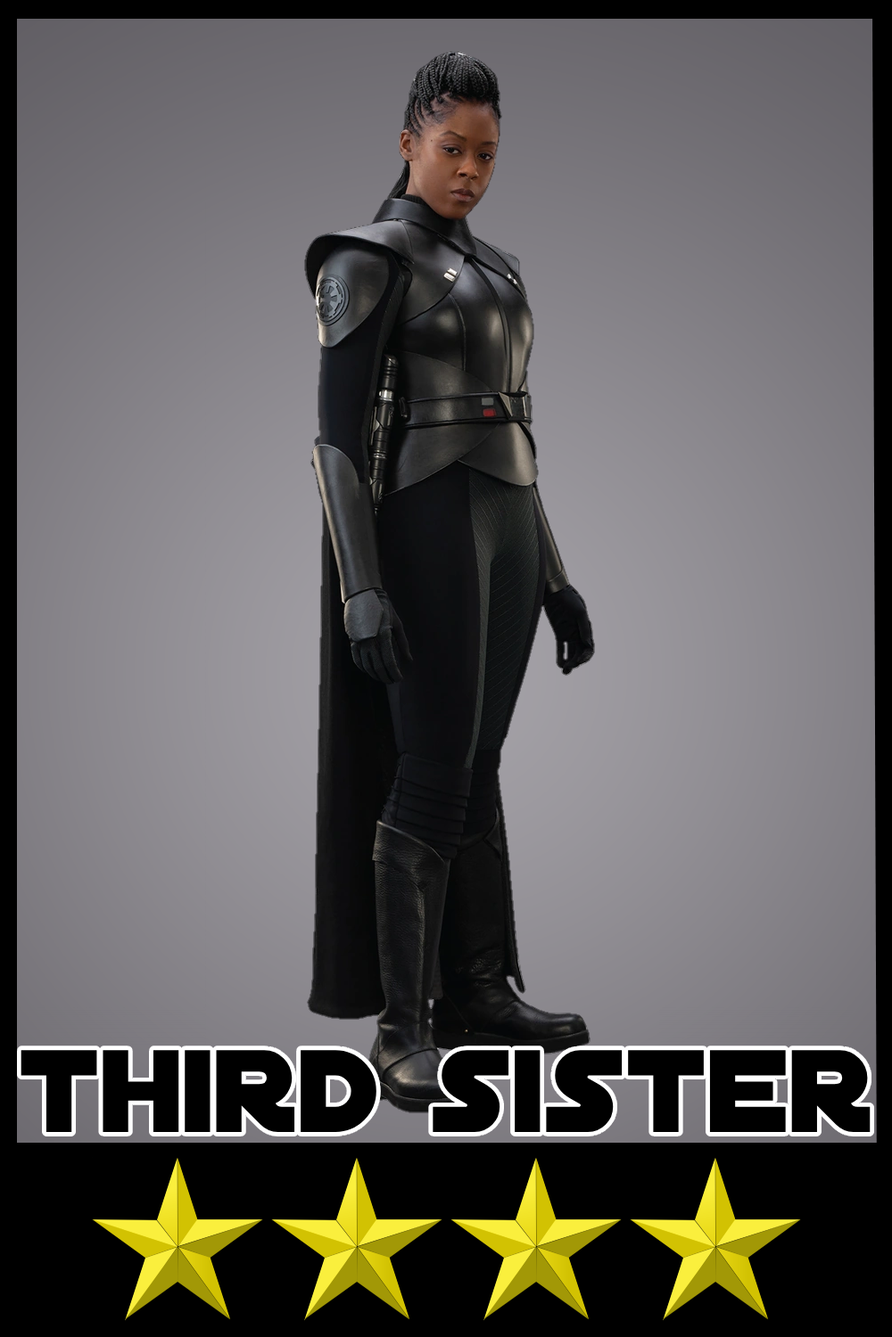
<style>
.page{position:relative;width:892px;height:1337px}
.page>*{position:absolute;margin:0}
.t1{font:125.9px "DistantGalaxy";color:#000000}
</style>
<div class="page">
<p class="t1" style="left:21px;top:1050px;width:849px;height:82px">third sister</p>
</div>
